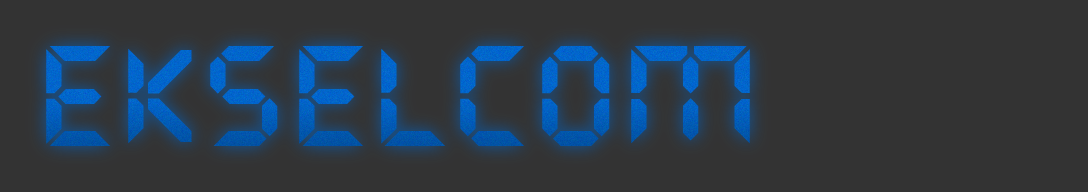
<style>
.page{position:relative;width:1088px;height:192px;background:#333333}
.page>*{position:absolute;margin:0}
.t1{font:143px "QuartzMS";color:#0062c7}
</style>
<div class="page">
<p class="t1" style="left:46px;top:46px;width:704px;height:100px">EKSELCOM</p>
</div>
